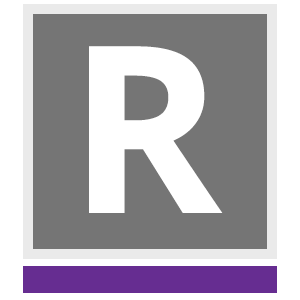
<style>
.page{position:relative;width:300px;height:300px;background:#757575}
.page>*{position:absolute;margin:0}
.t1{font:233.1px "OpenSans-Bold";letter-spacing:0.01em;color:#ffffff;text-transform:uppercase}
</style>
<div class="page">
<p class="t1" style="left:89px;top:46px;width:134px;height:167px">R</p>
</div>
